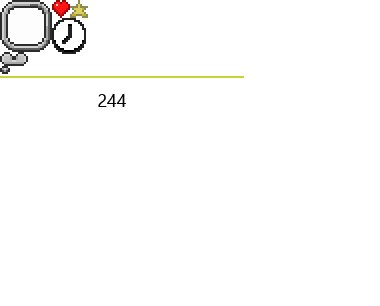
<style>
.page{position:relative;width:380px;height:306px;background:#ffffff}
.page>*{position:absolute;margin:0}
.t1{font:18px "SegoeUI";color:#000000}
</style>
<div class="page">
<p class="t1" style="left:98px;top:94px;width:28px;height:13px">244</p>
</div>
